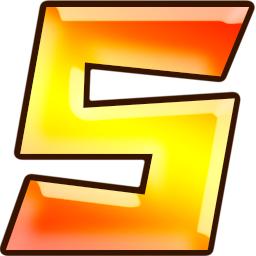
<style>
.page{position:relative;width:256px;height:256px;background:#ffffff}
.page>*{position:absolute;margin:0}
.t1{font:339.9px "PunkyTownv1"}
</style>
<div class="page">
<p class="t1" style="left:6px;top:7px;width:244px;height:243px">S</p>
<p class="t1" style="left:6px;top:7px;width:244px;height:243px">S</p>
<p class="t1" style="left:6px;top:7px;width:244px;height:243px">S</p>
</div>
